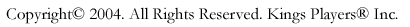
<style>
.page{position:relative;width:410px;height:27px;background:#ffffff}
.page>*{position:absolute;margin:0}
.t1{font:17px "Garamond";color:#000000}
</style>
<div class="page">
<p class="t1" style="left:6px;top:8px;width:405px;height:16px">Copyright© 2004. All Rights Reserved. Kings Players® Inc.</p>
</div>
